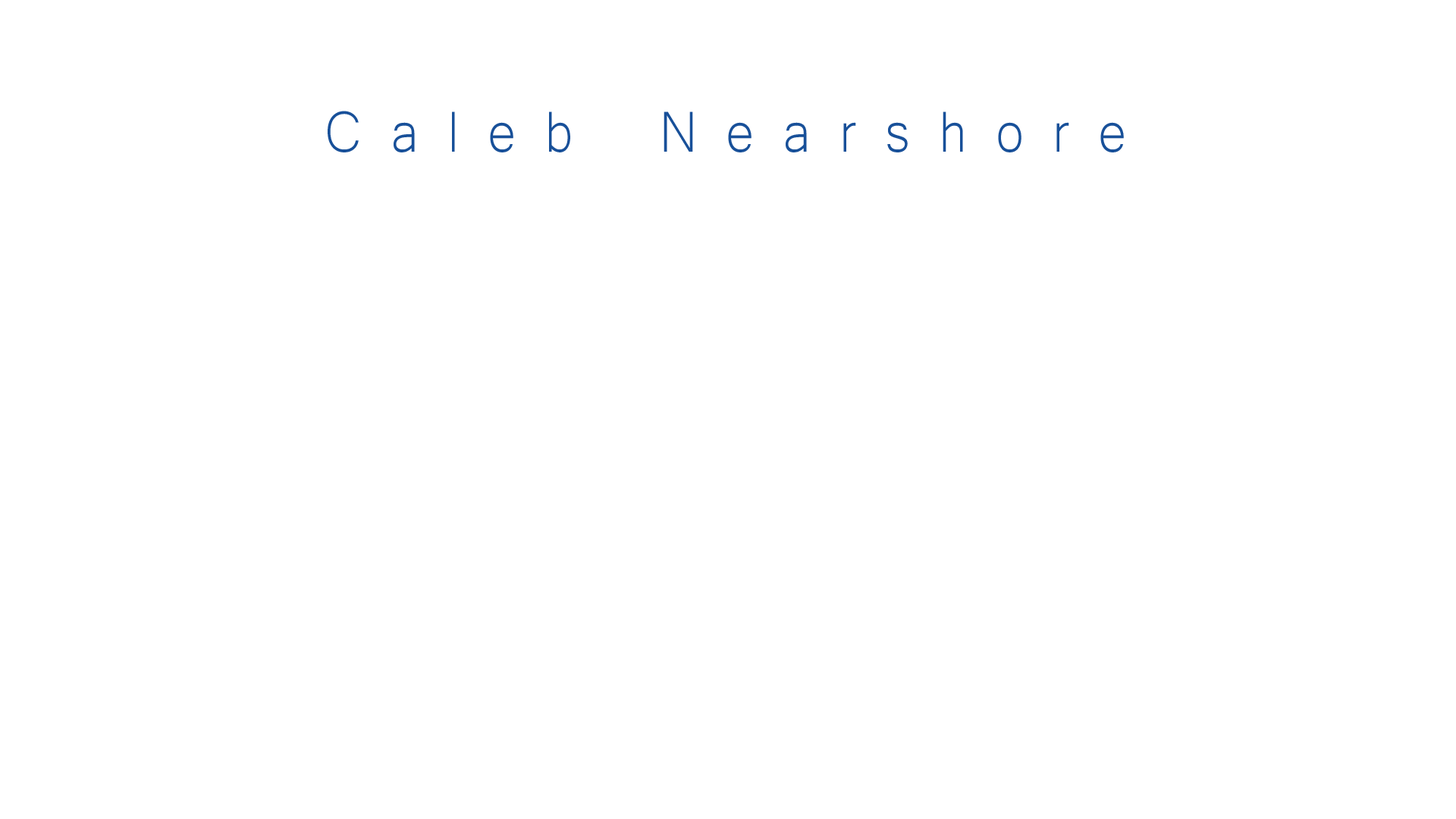
<style>
.page{position:relative;width:1456px;height:819px;background:#ffffff}
.page>*{position:absolute;margin:0}
.t1{font:74.5px "Microsoft-Yi-Baiti";letter-spacing:0.42em;color:#185099;scale:0.91 1}
.t2{font:74.5px "GoudyOldStyleT-Regular";letter-spacing:0.86em;color:#185099;scale:0.91 1}
</style>
<div class="page">
<p class="t1" style="left:328px;top:111px;width:796px;height:41px"><span class="t2"><br></span>Caleb Nearshore</p>
</div>
